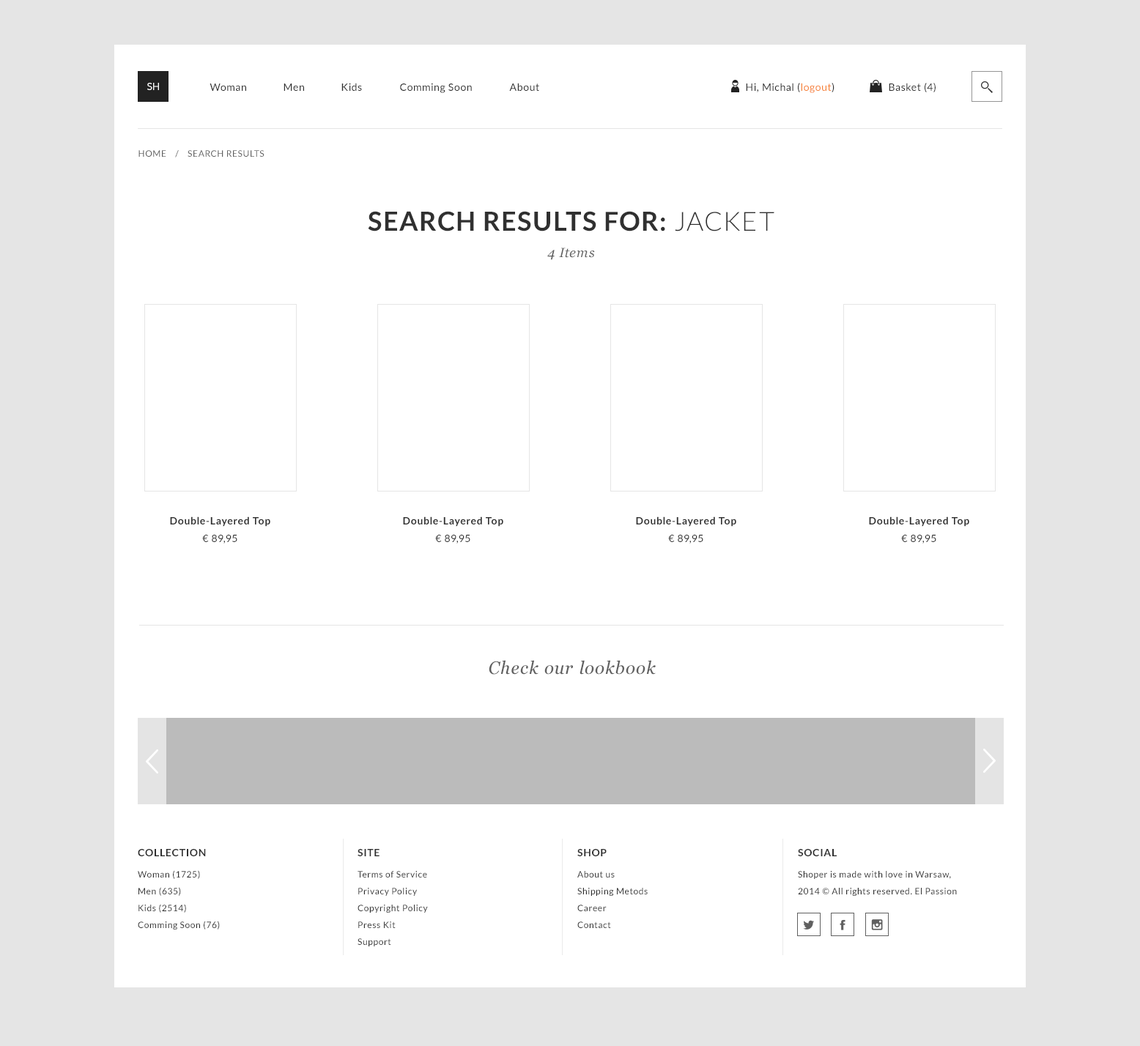
<style>
.page{position:relative;width:1140px;height:1046px;background:#ffffff}
.page>*{position:absolute;margin:0}
.t1{font:10.3px "Lato-Regular";color:#ffffff;text-transform:uppercase}
.t2{font:10.3px "Lato-Regular";letter-spacing:0.05em;color:#303030}
.t3{font:10.3px "Lato-Regular";letter-spacing:0.05em;color:#f68236}
.t4{font:8.8px "Lato-Regular";letter-spacing:0.05em;color:#606060;text-transform:uppercase}
.t5{font:26.4px/26.4px "Lato-Bold";letter-spacing:0.05em;color:#303030;text-transform:uppercase}
.t6{font:26.4px/26.4px "Lato-Light";letter-spacing:0.05em;color:#303030;text-transform:uppercase}
.t7{font:13.2px/26.4px "Georgia-Italic";letter-spacing:0.05em;color:#606060}
.t8{font:10.2px/17.6px "Lato-Bold";letter-spacing:0.05em;color:#303030}
.t9{font:10.2px/17.6px "Lato-Regular";letter-spacing:0.05em;color:#303030}
.t10{font:10.3px/17.6px "Lato-Bold";letter-spacing:0.05em;color:#303030}
.t11{font:10.3px/17.6px "Lato-Regular";letter-spacing:0.05em;color:#303030}
.t12{font:17.6px "Georgia-Italic";letter-spacing:0.05em;color:#606060}
.t13{font:10.3px "Lato-Bold";letter-spacing:0.05em;color:#303030;text-transform:uppercase}
.t14{font:8.8px/16.8px "Lato-Regular";letter-spacing:0.05em;color:#303030}
</style>
<div class="page">
<p class="t1" style="left:147px;top:83px;width:12px;height:7px">sh</p>
<p class="t2" style="left:210px;top:84px;width:36px;height:7px">Woman</p>
<p class="t2" style="left:284px;top:84px;width:20px;height:7px">Men</p>
<p class="t2" style="left:341px;top:83px;width:21px;height:8px">Kids</p>
<p class="t2" style="left:400px;top:83px;width:72px;height:10px">Comming Soon</p>
<p class="t2" style="left:509px;top:83px;width:30px;height:8px">About</p>
<p class="t2" style="left:746px;top:83px;width:88px;height:10px">Hi, Michal (<span class="t3">logout</span>)</p>
<p class="t2" style="left:889px;top:83px;width:46px;height:9px">Basket (4)</p>
<p class="t4" style="left:138px;top:150px;width:126px;height:8px">HOME    /    search results</p>
<p class="t5" style="left:368px;top:211px;width:406px;height:49px;text-align:center">Search results for: <span class="t6">Jacket<br></span><span class="t7">4 Items</span></p>
<p class="t8" style="left:170px;top:516px;width:100px;height:28px;text-align:center">Double-Layered Top<br><span class="t9">€ 89,95</span></p>
<p class="t10" style="left:403px;top:516px;width:100px;height:28px;text-align:center">Double-Layered Top<br><span class="t11">€ 89,95</span></p>
<p class="t10" style="left:636px;top:516px;width:100px;height:28px;text-align:center">Double-Layered Top<br><span class="t11">€ 89,95</span></p>
<p class="t8" style="left:869px;top:516px;width:100px;height:28px;text-align:center">Double-Layered Top<br><span class="t9">€ 89,95</span></p>
<p class="t12" style="left:489px;top:660px;width:167px;height:15px">Check our lookbook</p>
<p class="t13" style="left:138px;top:849px;width:68px;height:7px">Collection</p>
<p class="t13" style="left:357px;top:849px;width:22px;height:7px">site</p>
<p class="t13" style="left:577px;top:849px;width:30px;height:7px">Shop</p>
<p class="t13" style="left:798px;top:849px;width:39px;height:7px">social</p>
<p class="t14" style="left:138px;top:870px;width:82px;height:60px">Woman (1725)<br>Men (635)<br>Kids (2514)<br>Comming Soon (76)</p>
<p class="t14" style="left:357px;top:871px;width:71px;height:75px">Terms of Service <br>Privacy Policy <br>Copyright Policy <br>Press Kit <br>Support</p>
<p class="t14" style="left:577px;top:871px;width:71px;height:57px">About us<br>Shipping Metods<br>Career<br>Contact</p>
<p class="t14" style="left:798px;top:871px;width:159px;height:25px">Shoper is made with love in Warsaw, <br>2014 © All rights reserved. El Passion</p>
</div>
